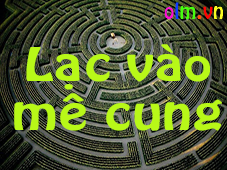
<style>
.page{position:relative;width:227px;height:170px}
.page>*{position:absolute;margin:0}
.t1{font:41.1px "VNI-Hobo";color:#b8f818;scale:1.32 1}
</style>
<div class="page">
<p class="t1" style="left:14px;top:44px;width:208px;height:87px;text-align:center">Laïc vaøo<br>meâ cung</p>
</div>
